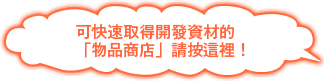
<style>
.page{position:relative;width:324px;height:81px;background:#ffffff}
.page>*{position:absolute;margin:0}
.t1{font:16px/18px "GothicMB101Pr6N-Medium";color:#ff683c}
</style>
<div class="page">
<p class="t1" style="left:76px;top:24px;width:169px;height:34px">可快速取得開發資材的<br>「物品商店」請按這裡！</p>
</div>
